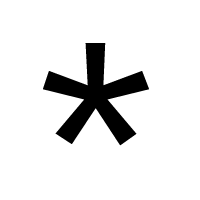
<style>
.page{position:relative;width:200px;height:200px;background:#ffffff}
.page>*{position:absolute;margin:0}
.t1{font:302.9px "Incised901BT-Light";color:#000000}
</style>
<div class="page">
<p class="t1" style="left:43px;top:43px;width:106px;height:103px">*</p>
</div>
